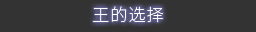
<style>
.page{position:relative;width:256px;height:32px;background:#333333}
.page>*{position:absolute;margin:0}
.t1{font:17px "NotoSansSC-Thin";letter-spacing:0.06em;color:#ffffff}
</style>
<div class="page">
<p class="t1" style="left:93px;top:6px;width:70px;height:17px">王的选择</p>
</div>
